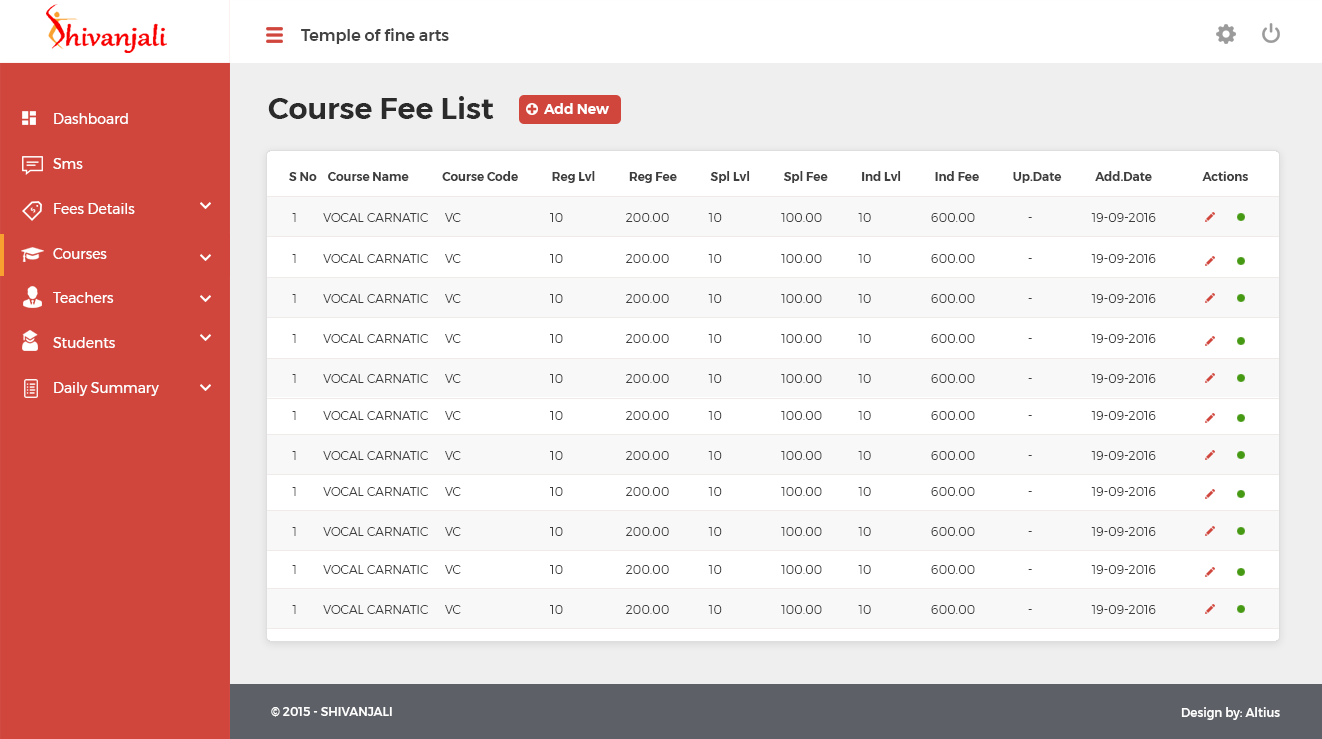
<style>
.page{position:relative;width:1322px;height:739px;background:#ffffff}
.page>*{position:absolute;margin:0}
.t1{font:16px "Montserrat-Medium";color:#434343}
.t2{font:30px "Montserrat-SemiBold";color:#2b2b2b}
.t3{font:14px/48px "Montserrat-Regular";color:#ffffff}
.t4{font:14px "Montserrat-SemiBold";color:#ffffff}
.t5{font:12px "Montserrat-SemiBold";color:#3e3e3e}
.t6{font:12px "Montserrat-Light";color:#3f3e3e}
.t7{font:12px "Montserrat-Medium";color:#ffffff}
</style>
<div class="page">
<p class="t1" style="left:301px;top:28px;width:148px;height:16px">Temple of fine arts</p>
<p class="t2" style="left:268px;top:96px;width:226px;height:23px">Course Fee List</p>
<p class="t3" style="left:53px;top:113px;width:106px;height:283px">Dashboard<br>Sms<br>Fees Details<br>Courses<br>Teachers<br>Students<br>Daily Summary</p>
<p class="t4" style="left:544px;top:103px;width:65px;height:11px">Add New</p>
<p class="t5" style="left:289px;top:171px;width:959px;height:12px">S No    Course Name            Course Code            Reg Lvl            Reg Fee            Spl Lvl            Spl Fee            Ind Lvl            Ind Fee            Up.Date            Add.Date                  Actions</p>
<p class="t6" style="left:292px;top:213px;width:864px;height:9px">1        VOCAL CARNATIC     VC                           10                   200.00            10                  100.00           10                  600.00                -                  19-09-2016</p>
<p class="t6" style="left:292px;top:254px;width:864px;height:9px">1        VOCAL CARNATIC     VC                           10                   200.00            10                  100.00           10                  600.00                -                  19-09-2016</p>
<p class="t6" style="left:292px;top:294px;width:864px;height:9px">1        VOCAL CARNATIC     VC                           10                   200.00            10                  100.00           10                  600.00                -                  19-09-2016</p>
<p class="t6" style="left:292px;top:334px;width:864px;height:9px">1        VOCAL CARNATIC     VC                           10                   200.00            10                  100.00           10                  600.00                -                  19-09-2016</p>
<p class="t6" style="left:292px;top:374px;width:864px;height:9px">1        VOCAL CARNATIC     VC                           10                   200.00            10                  100.00           10                  600.00                -                  19-09-2016</p>
<p class="t6" style="left:292px;top:411px;width:864px;height:9px">1        VOCAL CARNATIC     VC                           10                   200.00            10                  100.00           10                  600.00                -                  19-09-2016</p>
<p class="t6" style="left:292px;top:451px;width:864px;height:9px">1        VOCAL CARNATIC     VC                           10                   200.00            10                  100.00           10                  600.00                -                  19-09-2016</p>
<p class="t6" style="left:292px;top:487px;width:864px;height:9px">1        VOCAL CARNATIC     VC                           10                   200.00            10                  100.00           10                  600.00                -                  19-09-2016</p>
<p class="t6" style="left:292px;top:527px;width:864px;height:9px">1        VOCAL CARNATIC     VC                           10                   200.00            10                  100.00           10                  600.00                -                  19-09-2016</p>
<p class="t6" style="left:292px;top:565px;width:864px;height:9px">1        VOCAL CARNATIC     VC                           10                   200.00            10                  100.00           10                  600.00                -                  19-09-2016</p>
<p class="t6" style="left:292px;top:605px;width:864px;height:9px">1        VOCAL CARNATIC     VC                           10                   200.00            10                  100.00           10                  600.00                -                  19-09-2016</p>
<p class="t7" style="left:271px;top:707px;width:121px;height:10px">© 2015 - SHIVANJALI</p>
<p class="t7" style="left:1181px;top:707px;width:99px;height:13px">Design by: Altius</p>
</div>
